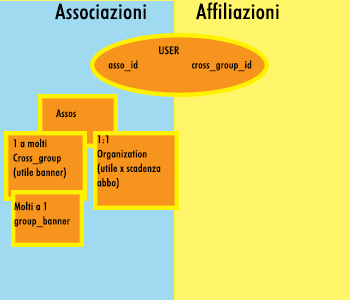
<style>
.page{position:relative;width:350px;height:300px;background:#fff568}
.page>*{position:absolute;margin:0}
.t1{font:21.6px "FuturaBT-MediumCondensed";letter-spacing:0.01em;color:#030303;scale:1.11 1}
.t2{font:10.8px "FuturaBT-MediumCondensed";letter-spacing:0.01em;color:#030303;scale:1.11 1}
</style>
<div class="page">
<p class="t1" style="left:55px;top:3px;width:92px;height:17px">Associazioni</p>
<p class="t1" style="left:196px;top:2px;width:83px;height:18px">Affiliazioni</p>
<p class="t2" style="left:108px;top:46px;width:144px;height:26px">USER<br>  asso_id                      cross_group_id</p>
<p class="t2" style="left:56px;top:109px;width:20px;height:9px">Assos</p>
<p class="t2" style="left:97px;top:135px;width:64px;height:54px">1:1 <br>Organization<br>(utile x scadenza abbo)</p>
<p class="t2" style="left:13px;top:138px;width:53px;height:41px">1 a molti<br>Cross_group<br>(utile banner)</p>
<p class="t2" style="left:14px;top:201px;width:56px;height:27px">Molti a 1<br>group_banner</p>
</div>
